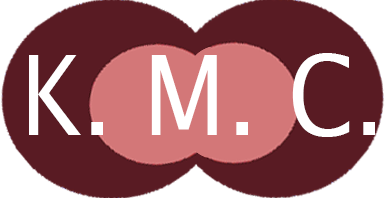
<style>
.page{position:relative;width:385px;height:198px;background:#591b23}
.page>*{position:absolute;margin:0}
.t1{font:111px "LucidaSans";color:#ffffff;scale:0.87 1}
</style>
<div class="page">
<p class="t1" style="left:29px;top:53px;width:346px;height:84px">K. M. C.</p>
</div>
